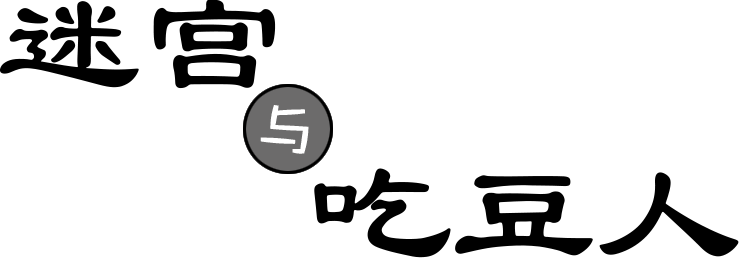
<style>
.page{position:relative;width:740px;height:258px;background:#ffffff}
.page>*{position:absolute;margin:0}
.t1{font:144px "STBaoliSC-Regular";color:#000000}
</style>
<div class="page">
<p class="t1" style="left:0px;top:0px;width:276px;height:89px">迷宫</p>
<p class="t1" style="left:314px;top:168px;width:425px;height:90px">吃豆人</p>
</div>
